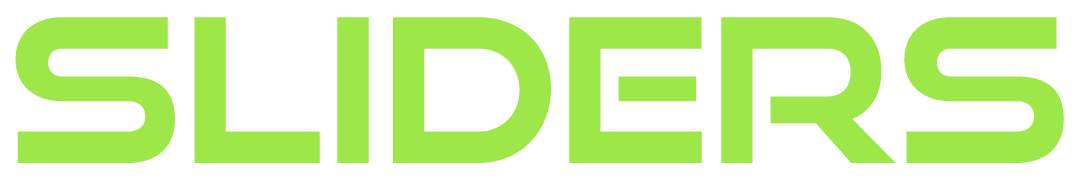
<style>
.page{position:relative;width:1078px;height:183px;background:#ffffff}
.page>*{position:absolute;margin:0}
.t1{font:200px "GoodTimesRg-Bold";color:#9ee749}
</style>
<div class="page">
<p class="t1" style="left:15px;top:17px;width:1049px;height:146px">SLIDERS</p>
</div>
